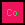
<style>
.page{position:relative;width:25px;height:25px;background:#ed145b}
.page>*{position:absolute;margin:0}
.t1{font:9px "MicrosoftSansSerif";color:#00ff24}
</style>
<div class="page">
<p class="t1" style="left:7px;top:9px;width:10px;height:7px">Co</p>
</div>
